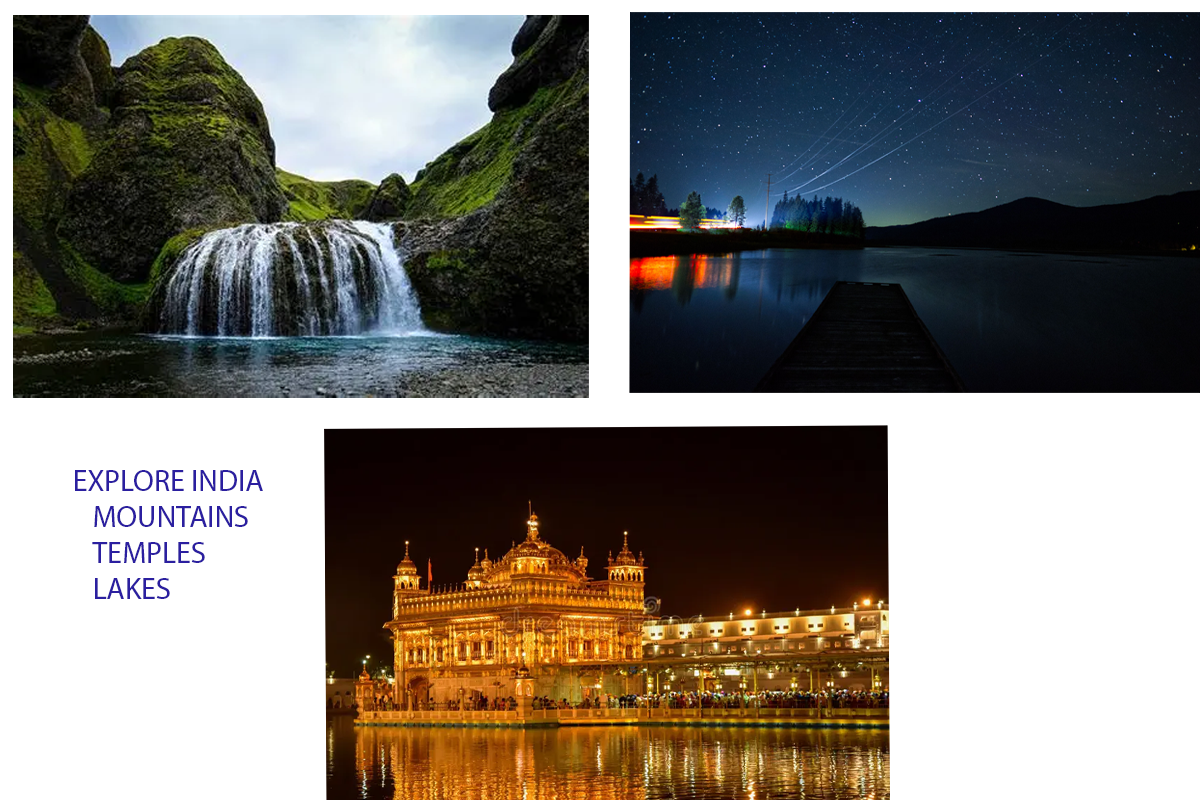
<style>
.page{position:relative;width:1200px;height:800px;background:#ffffff}
.page>*{position:absolute;margin:0}
.t1{font:30px "MyriadPro-Regular";color:#2b1fa0}
</style>
<div class="page">
<p class="t1" style="left:75px;top:470px;width:188px;height:21px">EXPLORE INDIA</p>
<p class="t1" style="left:92px;top:506px;width:156px;height:93px">MOUNTAINS<br>TEMPLES<br>LAKES</p>
</div>
